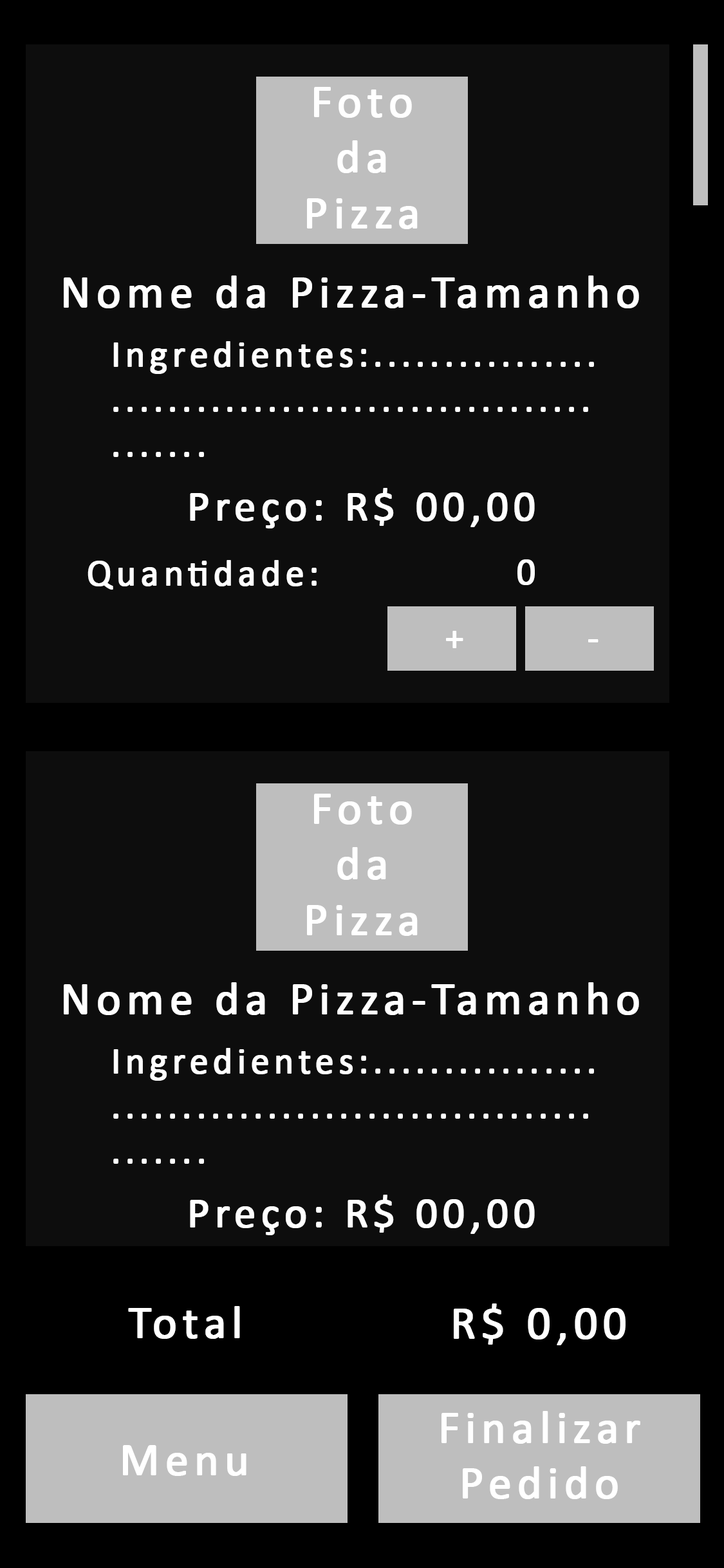
<style>
.page{position:relative;width:724px;height:1568px;background:#0d0d0d}
.page>*{position:absolute;margin:0}
.t1{font:46.3px "Calibri";letter-spacing:0.1em;color:#ffffff;font-weight:bold}
.t2{font:37.5px "Calibri";letter-spacing:0.1em;color:#ffffff;font-weight:bold}
.t3{font:42.9px "Calibri";letter-spacing:0.1em;color:#ffffff;font-weight:bold}
</style>
<div class="page">
<p class="t1" style="left:307px;top:87px;width:111px;height:142px;text-align:center">Foto <br>da<br>Pizza</p>
<p class="t1" style="left:64px;top:275px;width:575px;height:33px">Nome da Pizza-Tamanho</p>
<p class="t2" style="left:113px;top:341px;width:481px;height:116px">Ingredientes:................<br>..................................<br>.......</p>
<p class="t3" style="left:190px;top:488px;width:345px;height:40px">Preço: R$ 00,00</p>
<p class="t2" style="left:88px;top:560px;width:229px;height:30px">Quantidade:</p>
<p class="t2" style="left:518px;top:559px;width:17px;height:26px">0</p>
<p class="t2" style="left:446px;top:631px;width:17px;height:17px">+</p>
<p class="t2" style="left:588px;top:639px;width:11px;height:3px">-</p>
<p class="t1" style="left:307px;top:794px;width:111px;height:142px;text-align:center">Foto <br>da<br>Pizza</p>
<p class="t1" style="left:64px;top:982px;width:575px;height:33px">Nome da Pizza-Tamanho</p>
<p class="t2" style="left:113px;top:1048px;width:481px;height:116px">Ingredientes:................<br>..................................<br>.......</p>
<p class="t3" style="left:190px;top:1195px;width:345px;height:40px">Preço: R$ 00,00</p>
<p class="t1" style="left:128px;top:1306px;width:112px;height:33px">Total</p>
<p class="t1" style="left:454px;top:1303px;width:172px;height:42px">R$ 0,00</p>
<p class="t1" style="left:442px;top:1411px;width:198px;height:88px;text-align:center">Finalizar <br>Pedido</p>
<p class="t1" style="left:123px;top:1445px;width:124px;height:31px">Menu</p>
</div>
